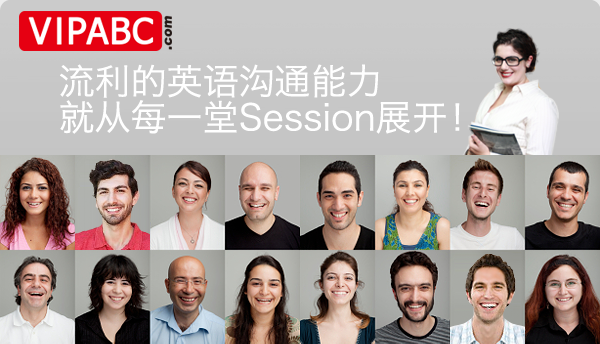
<style>
.page{position:relative;width:600px;height:344px}
.page>*{position:absolute;margin:0}
.t1{font:36px/36px "HiraginoSansGB-W3";color:#ffffff}
</style>
<div class="page">
<p class="t1" style="left:60px;top:64px;width:400px;height:70px">流利的英语沟通能力<br>就从每一堂Session展开！</p>
</div>
